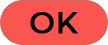
<style>
.page{position:relative;width:108px;height:45px;background:#fa554f}
.page>*{position:absolute;margin:0}
.t1{font:30px "Montserrat-Medium";color:#000000;font-weight:bold}
</style>
<div class="page">
<p class="t1" style="left:30px;top:12px;width:48px;height:22px">OK</p>
</div>
